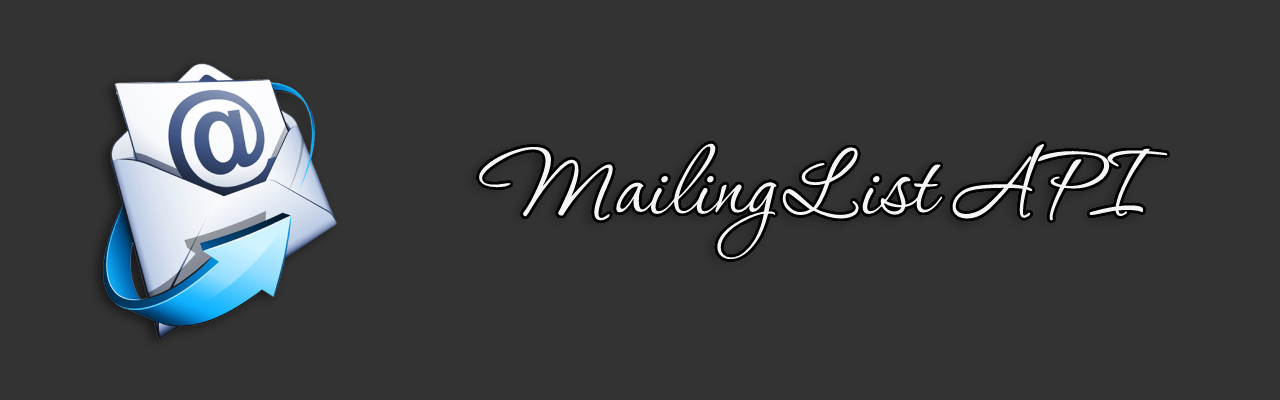
<style>
.page{position:relative;width:1280px;height:400px;background:#333333}
.page>*{position:absolute;margin:0}
.t1{font:116px "Corinthia-Regular";color:#f5f5f5}
</style>
<div class="page">
<p class="t1" style="left:479px;top:143px;width:689px;height:117px">Mailing List API</p>
</div>
